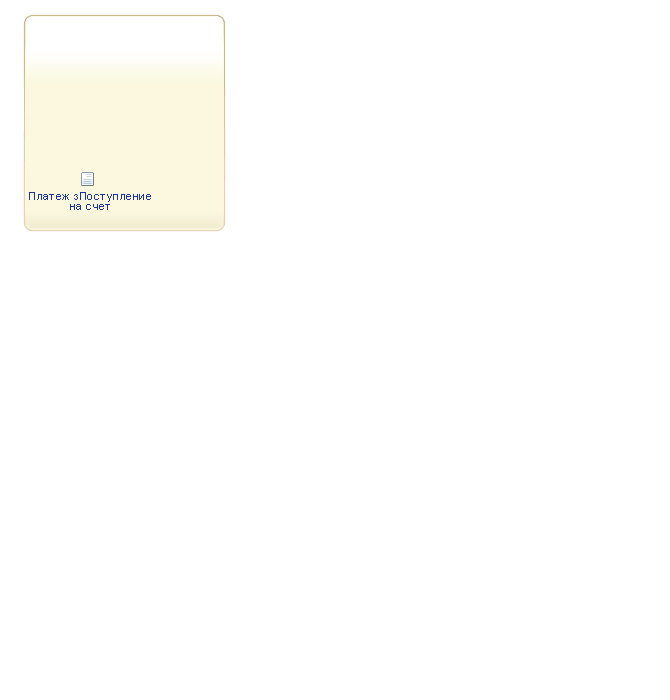
<style>
.page{position:relative;width:670px;height:700px;background:#ffffff}
.page>*{position:absolute;margin:0}
.t1{font:11px/10px "ArialMT";letter-spacing:0.045em;color:#1834a1}
</style>
<div class="page">
<p class="t1" style="left:29px;top:192px;width:122px;height:18px;text-align:center">Платеж зПоступление<br>на счет</p>
</div>
